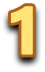
<style>
.page{position:relative;width:45px;height:72px;background:#ffffff}
.page>*{position:absolute;margin:0}
.t1{font:60px "MicrosoftYaHei-Bold";color:#ffe479;font-weight:bold}
</style>
<div class="page">
<p class="t1" style="left:11px;top:6px;width:22px;height:49px">1</p>
</div>
